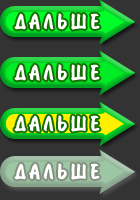
<style>
.page{position:relative;width:140px;height:200px;background:#333333}
.page>*{position:absolute;margin:0}
.t1{font:24px "BrushType-Bold";letter-spacing:0.15em;color:#ffffff}
</style>
<div class="page">
<p class="t1" style="left:14px;top:13px;width:86px;height:17px">ÄÀËÜØÅ</p>
<p class="t1" style="left:14px;top:64px;width:86px;height:17px">ÄÀËÜØÅ</p>
<p class="t1" style="left:14px;top:115px;width:86px;height:17px">ÄÀËÜØÅ</p>
<p class="t1" style="left:14px;top:163px;width:86px;height:17px">ÄÀËÜØÅ</p>
</div>
